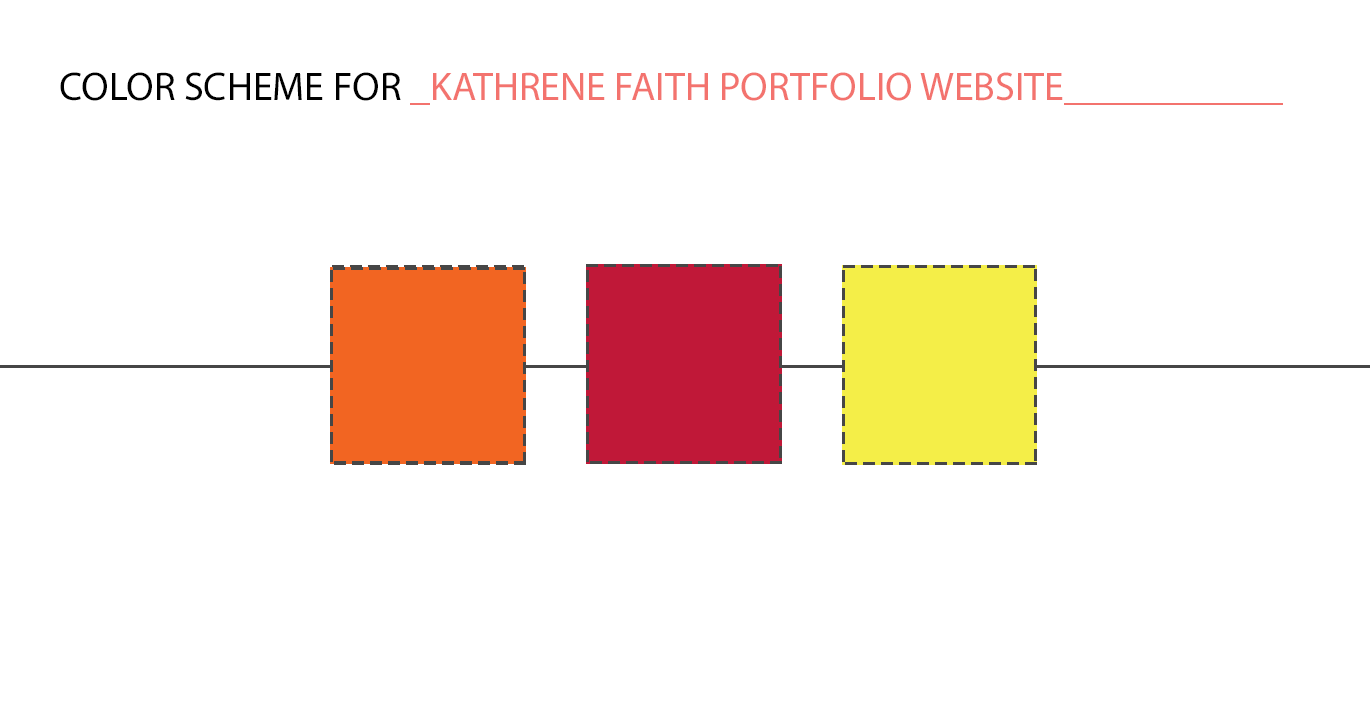
<style>
.page{position:relative;width:1370px;height:712px;background:#ffffff}
.page>*{position:absolute;margin:0}
.t1{font:40px "MyriadPro-Regular";color:#f3736e;text-transform:uppercase}
.t2{font:40px "MyriadPro-Regular";color:#000000;text-transform:uppercase}
</style>
<div class="page">
<p class="t1" style="left:60px;top:72px;width:1223px;height:33px"><span class="t2">Color Scheme for </span>_Kathrene Faith Portfolio Website___________</p>
</div>
